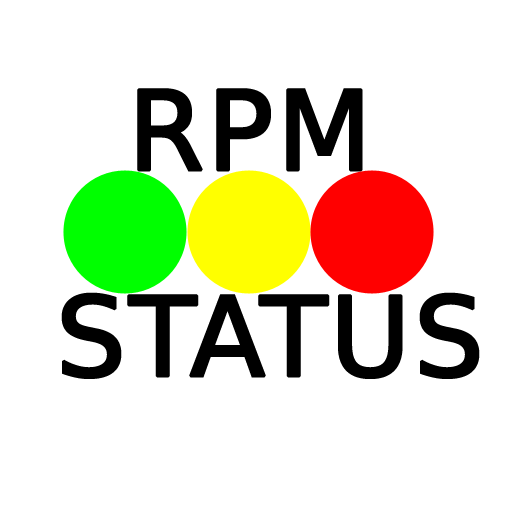
<style>
.page{position:relative;width:512px;height:512px;background:#ffffff}
.page>*{position:absolute;margin:0}
.t1{font:110px "BitstreamVeraSans-Roman";color:#000000;font-variant:small-caps;font-weight:bold}
</style>
<div class="page">
<p class="t1" style="left:137px;top:88px;width:226px;height:84px">RPM</p>
<p class="t1" style="left:61px;top:292px;width:419px;height:87px">STATUS</p>
</div>
